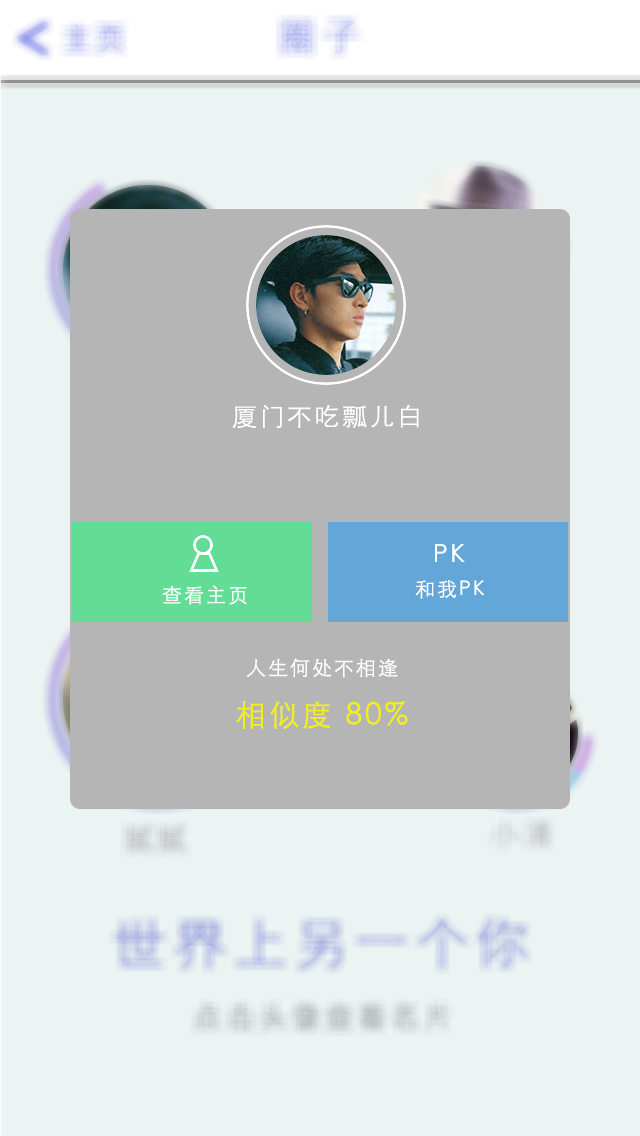
<style>
.page{position:relative;width:640px;height:1136px;background:#ebf3f3}
.page>*{position:absolute;margin:0}
.t1{font:25px "STXihei";letter-spacing:0.1em;color:#ffffff}
.t2{font:20px "STXihei";letter-spacing:0.1em;color:#ffffff}
.t3{font:30px "STXihei";letter-spacing:0.1em;color:#f3f00d}
</style>
<div class="page">
<p class="t1" style="left:232px;top:405px;width:187px;height:24px">厦门不吃瓢儿白</p>
<p class="t1" style="left:435px;top:544px;width:30px;height:18px">PK</p>
<p class="t2" style="left:415px;top:580px;width:70px;height:19px">和我PK</p>
<p class="t2" style="left:162px;top:585px;width:85px;height:20px">查看主页</p>
<p class="t2" style="left:246px;top:658px;width:152px;height:20px">人生何处不相逢</p>
<p class="t3" style="left:236px;top:701px;width:172px;height:28px">相似度 80%</p>
</div>
